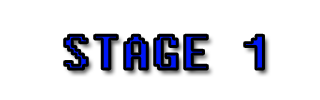
<style>
.page{position:relative;width:320px;height:100px;background:#ffffff}
.page>*{position:absolute;margin:0}
.t1{font:48px "Fixedsys"}
</style>
<div class="page">
<p class="t1" style="left:64px;top:35px;width:200px;height:34px">STAGE 1</p>
</div>
